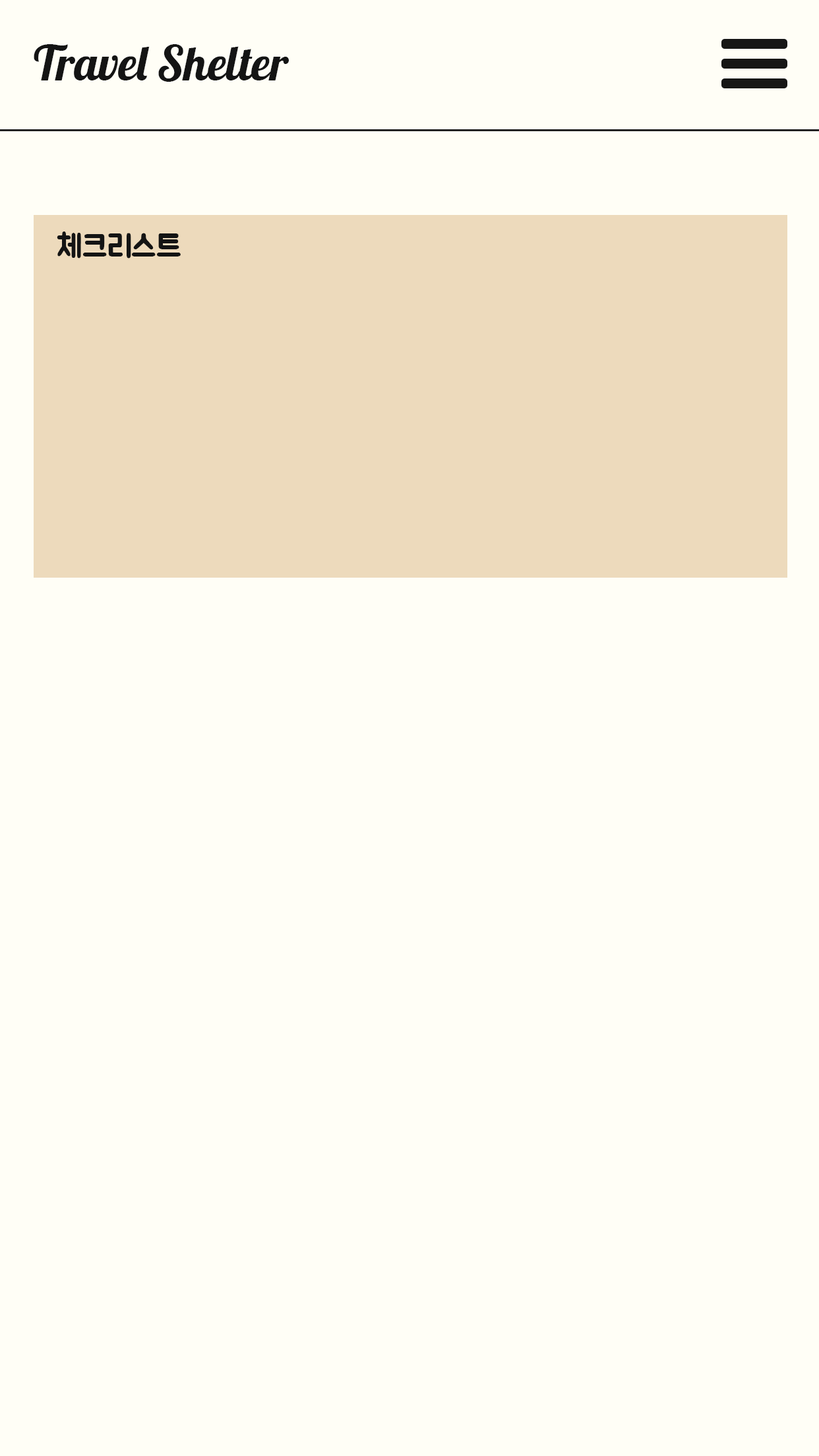
<style>
.page{position:relative;width:819px;height:1456px;background:#fffef6}
.page>*{position:absolute;margin:0}
.t1{font:47.5px "Lobster-Regular";color:#141414}
.t2{font:31.7px "Jua-Regular";color:#141414}
</style>
<div class="page">
<p class="t1" style="left:34px;top:44px;width:255px;height:38px">Travel Shelter</p>
<p class="t2" style="left:57px;top:231px;width:124px;height:27px">체크리스트</p>
</div>
